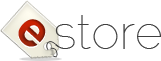
<style>
.page{position:relative;width:161px;height:61px;background:#ffffff}
.page>*{position:absolute;margin:0}
.t1{font:48px "Raleway-Thin";color:#404040}
.t2{font:48px "Helvetica-Bold"}
</style>
<div class="page">
<p class="t1" style="left:55px;top:15px;width:106px;height:34px">store</p>
<p class="t2" style="left:18px;top:19px;width:28px;height:28px;rotate:42deg">e</p>
</div>
